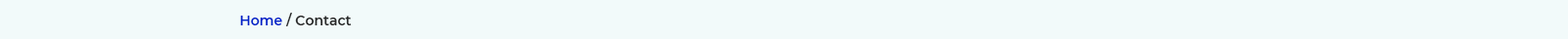
<style>
.page{position:relative;width:1568px;height:39px;background:#f2fafa}
.page>*{position:absolute;margin:0}
.t1{font:13.7px "Montserrat-SemiBold";color:#292929}
.t2{font:13.7px "Montserrat-SemiBold";color:#0023c9}
</style>
<div class="page">
<p class="t1" style="left:240px;top:13px;width:112px;height:13px"><span class="t2">Home </span>/ Contact</p>
</div>
